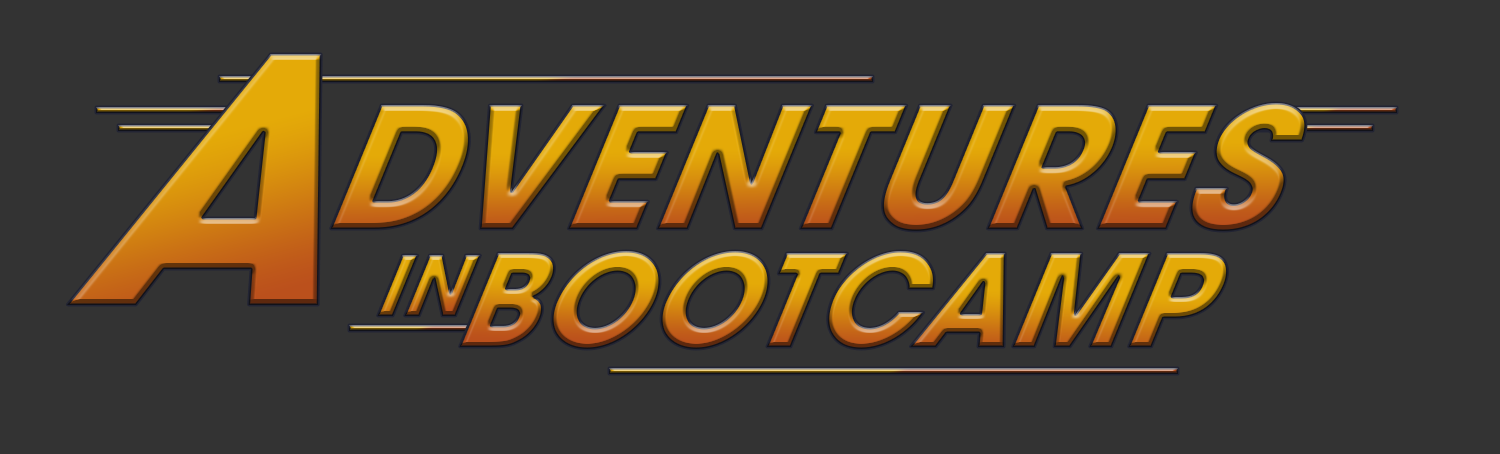
<style>
.page{position:relative;width:1500px;height:454px;background:#333333}
.page>*{position:absolute;margin:0}
.t1{font:366.6px "ITCAvantGardePro-Bold";text-transform:uppercase;scale:0.93 1}
.t2{font:181.2px "ITCAvantGardePro-Bold";text-transform:uppercase;scale:0.93 1}
.t3{font:88.5px "ITCAvantGardePro-Bold";text-transform:uppercase;scale:0.93 1}
.t4{font:137.1px "ITCAvantGardePro-Bold";text-transform:uppercase;scale:0.93 1}
</style>
<div class="page">
<p class="t1" style="left:67px;top:54px;width:255px;height:251px">A</p>
<p class="t2" style="left:330px;top:103px;width:976px;height:128px">Dventures</p>
<p class="t3" style="left:377px;top:255px;width:104px;height:61px">in</p>
<p class="t4" style="left:459px;top:251px;width:769px;height:98px">bootcamp</p>
</div>
